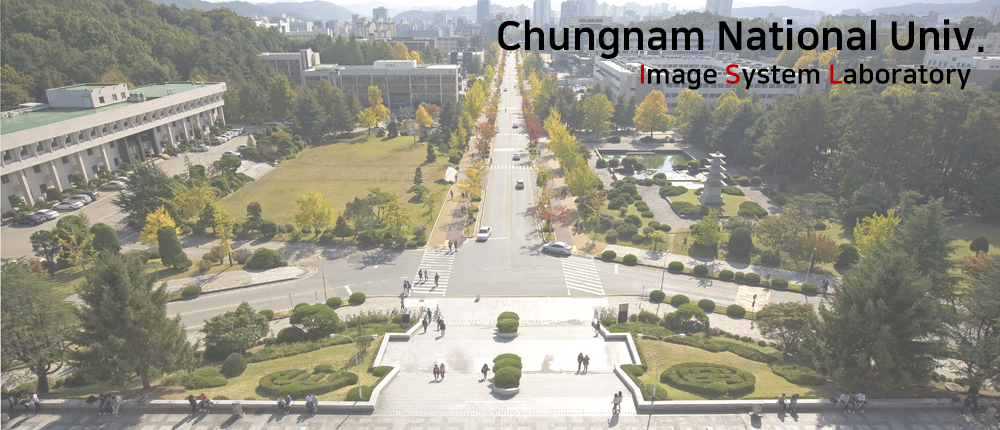
<style>
.page{position:relative;width:1000px;height:430px}
.page>*{position:absolute;margin:0}
.t1{font:40px "NanumSquareEB";color:#000000}
.t2{font:26.7px "NanumSquareEB";color:#000000}
.t3{font:26.7px "NanumSquareEB";color:#c00000}
</style>
<div class="page">
<p class="t1" style="left:498px;top:19px;width:486px;height:40px">Chungnam National Univ.</p>
<p class="t2" style="left:640px;top:63px;width:331px;height:27px"><span class="t3">I</span>mage <span class="t3">S</span>ystem <span class="t3">L</span>aboratory</p>
</div>
